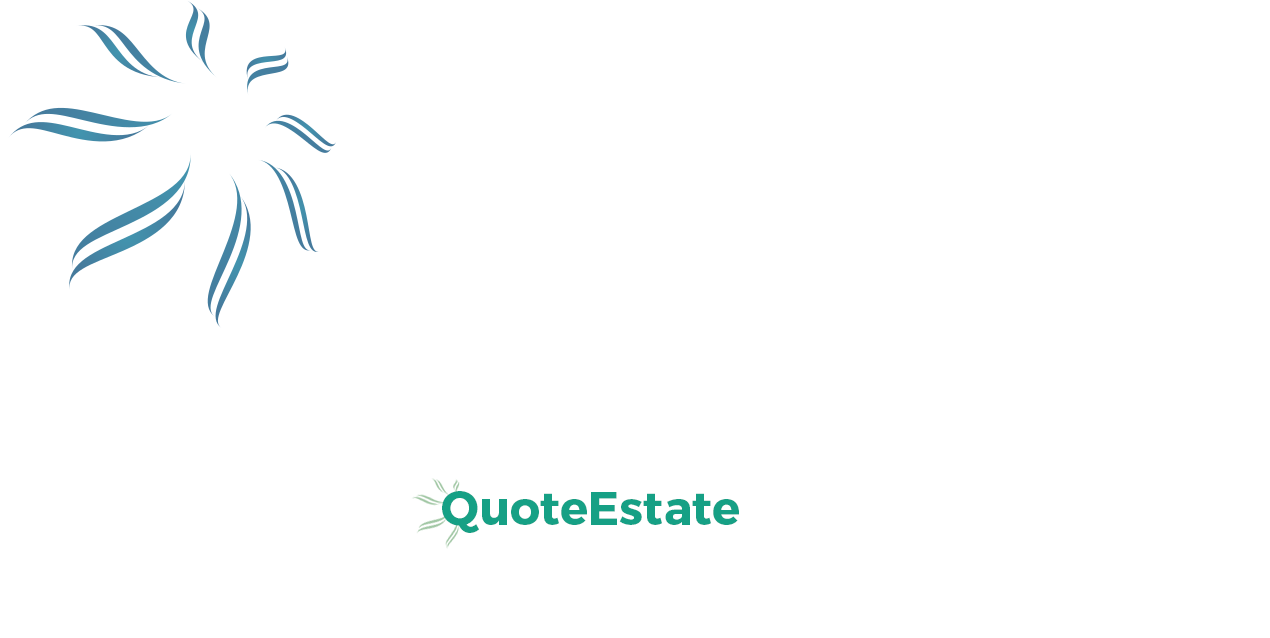
<style>
.page{position:relative;width:1270px;height:638px;background:#ffffff}
.page>*{position:absolute;margin:0}
.t1{font:47.1px "Montserrat-Bold";color:#16a085}
</style>
<div class="page">
<p class="t1" style="left:442px;top:491px;width:297px;height:42px">QuoteEstate</p>
</div>
